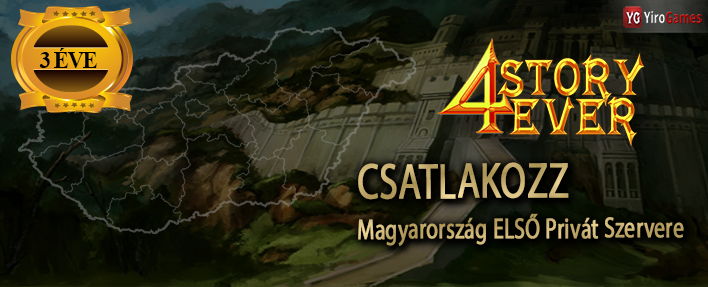
<style>
.page{position:relative;width:708px;height:287px}
.page>*{position:absolute;margin:0}
.t1{font:24px "TimesNewRomanPS-BoldMT";letter-spacing:-0.07em;color:#000000;scale:0.97 1}
.t2{font:28.9px "MyriadPro-Regular";color:#c3ac6e;font-weight:bold;scale:0.73 1}
.t3{font:50.1px "MyriadPro-Regular";color:#c3ac6e;font-weight:bold;scale:0.73 1}
</style>
<div class="page">
<p class="t1" style="left:39px;top:48px;width:58px;height:20px">3 ÉVE</p>
<p class="t2" style="left:358px;top:162px;width:326px;height:84px"><span class="t3">CSATLAKOZZ<br></span>Magyarország ELSŐ Privát Szervere</p>
</div>
